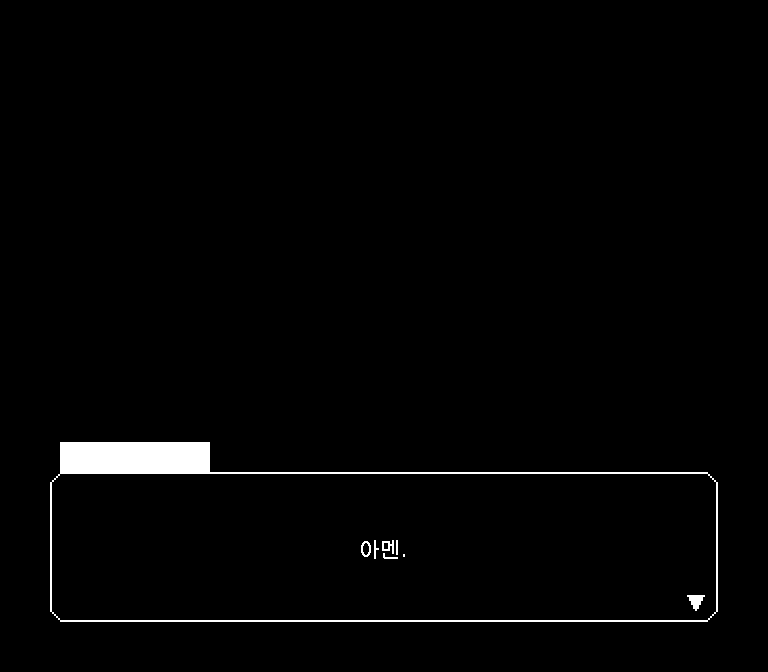
<style>
.page{position:relative;width:768px;height:672px;background:#000000}
.page>*{position:absolute;margin:0}
.t1{font:20px "Gulim";color:#ffffff;font-weight:bold}
</style>
<div class="page">
<p class="t1" style="left:361px;top:540px;width:44px;height:19px">아멘.</p>
</div>
